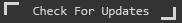
<style>
.page{position:relative;width:182px;height:23px;background:#333333}
.page>*{position:absolute;margin:0}
.t1{font:12.5px "Consolas";color:#d3d3d3}
</style>
<div class="page">
<p class="t1" style="left:33px;top:6px;width:116px;height:12px">Check For Updates</p>
</div>
